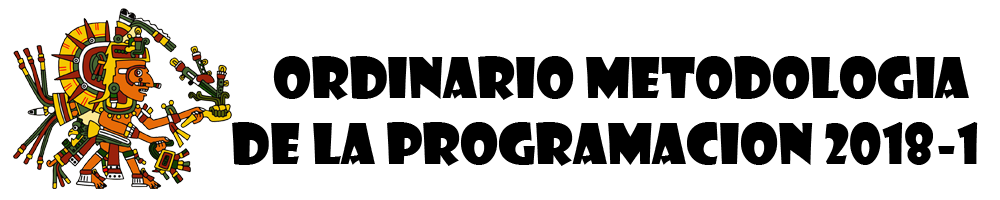
<style>
.page{position:relative;width:1000px;height:200px;background:#ffffff}
.page>*{position:absolute;margin:0}
.t1{font:55px "ShowcardGothic-Reg";color:#000000}
</style>
<div class="page">
<p class="t1" style="left:232px;top:56px;width:746px;height:110px;text-align:right">Ordinario Metodologia <br>de la Programacion 2018-1</p>
</div>
